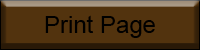
<style>
.page{position:relative;width:200px;height:50px;background:#52330e}
.page>*{position:absolute;margin:0}
.t1{font:24px "ArialMT";color:#000000}
</style>
<div class="page">
<p class="t1" style="left:45px;top:15px;width:110px;height:23px">Print Page</p>
</div>
